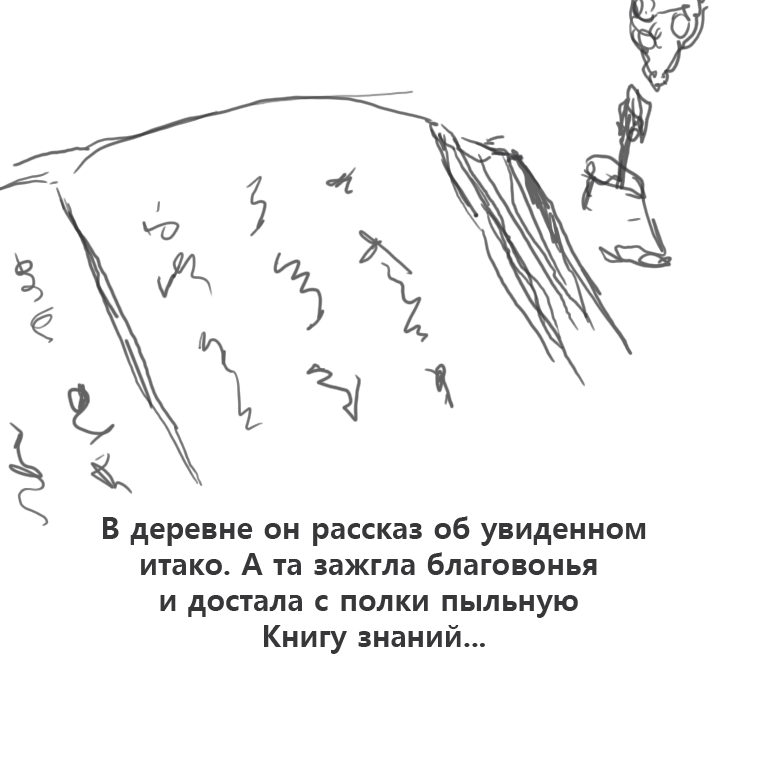
<style>
.page{position:relative;width:765px;height:759px;background:#ffffff}
.page>*{position:absolute;margin:0}
.t1{font:30px "MalgunGothicBold";color:#373739}
</style>
<div class="page">
<p class="t1" style="left:103px;top:516px;width:543px;height:138px;text-align:center">В деревне он рассказ об увиденном<br>итако. А та зажгла благовонья <br>и достала с полки пыльную <br>Книгу знаний...</p>
</div>
